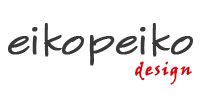
<style>
.page{position:relative;width:200px;height:100px;background:#ffffff}
.page>*{position:absolute;margin:0}
.t1{font:38.9px "SketchFlowPrint";letter-spacing:0.01em;color:#393939;font-weight:bold}
.t2{font:16.7px "VinerHandITC";letter-spacing:0.1em;color:#db020c;font-weight:bold}
</style>
<div class="page">
<p class="t1" style="left:8px;top:23px;width:185px;height:43px">eikopeiko</p>
<p class="t2" style="left:135px;top:61px;width:57px;height:24px">design</p>
</div>
